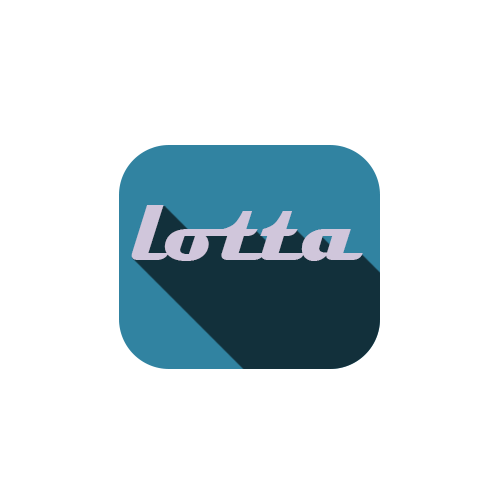
<style>
.page{position:relative;width:500px;height:500px;background:#ffffff}
.page>*{position:absolute;margin:0}
.t1{font:93.8px "Magneto-Bold";color:#d0c6db}
</style>
<div class="page">
<p class="t1" style="left:131px;top:205px;width:232px;height:56px">lotta</p>
</div>
